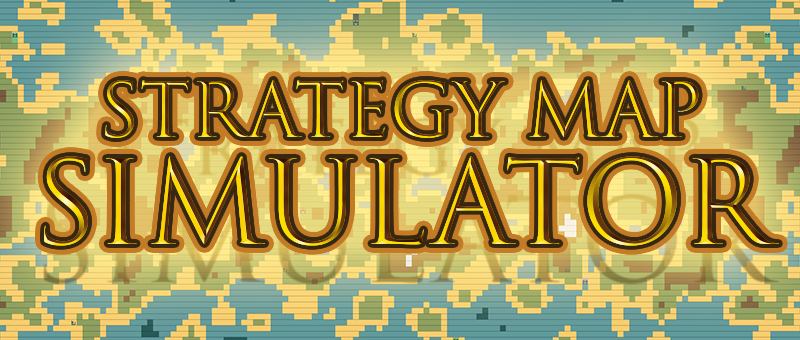
<style>
.page{position:relative;width:800px;height:340px}
.page>*{position:absolute;margin:0}
.t1{font:73.6px/107px "TrajanColor-Concept"}
.t2{font:113.7px/107px "TrajanColor-Concept"}
</style>
<div class="page">
<p class="t1" style="left:44px;top:79px;width:735px;height:167px;text-align:center">Strategy Map <br><span class="t2">Simulator</span></p>
</div>
